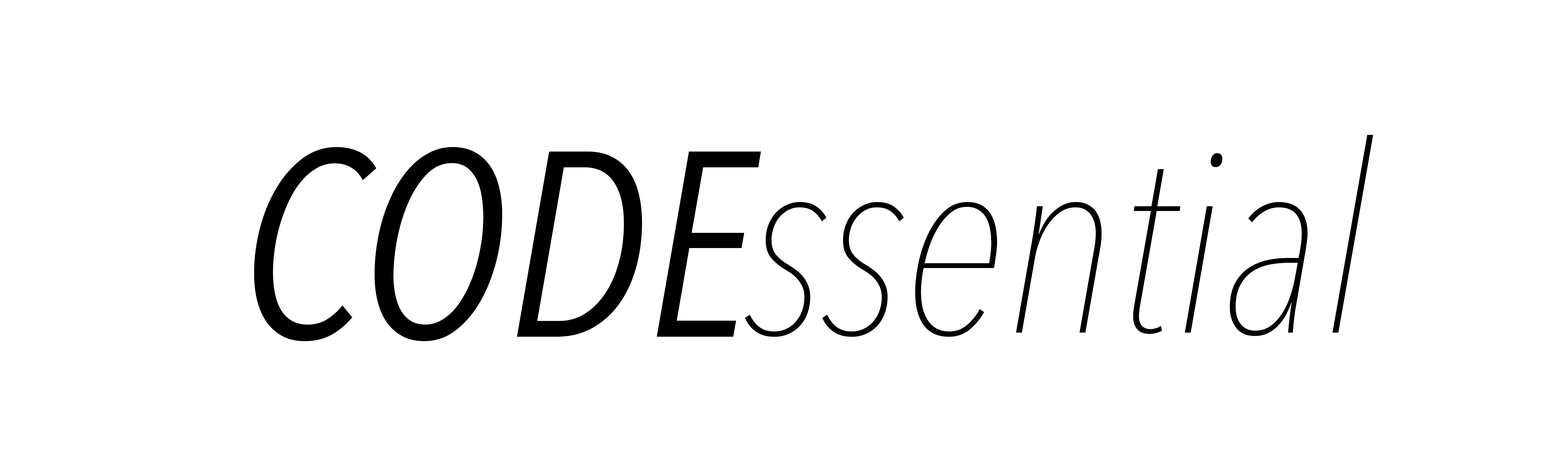
<style>
.page{position:relative;width:1568px;height:470px;background:#ffffff}
.page>*{position:absolute;margin:0}
.t1{font:261.3px "AvenirNextCondensed-UltraLightItalic";color:#000000}
.t2{font:261.3px "AvenirNextCondensed-Italic";color:#000000}
</style>
<div class="page">
<p class="t1" style="left:745px;top:135px;width:628px;height:202px">ssential</p>
<p class="t2" style="left:254px;top:147px;width:507px;height:194px">CODE</p>
</div>
